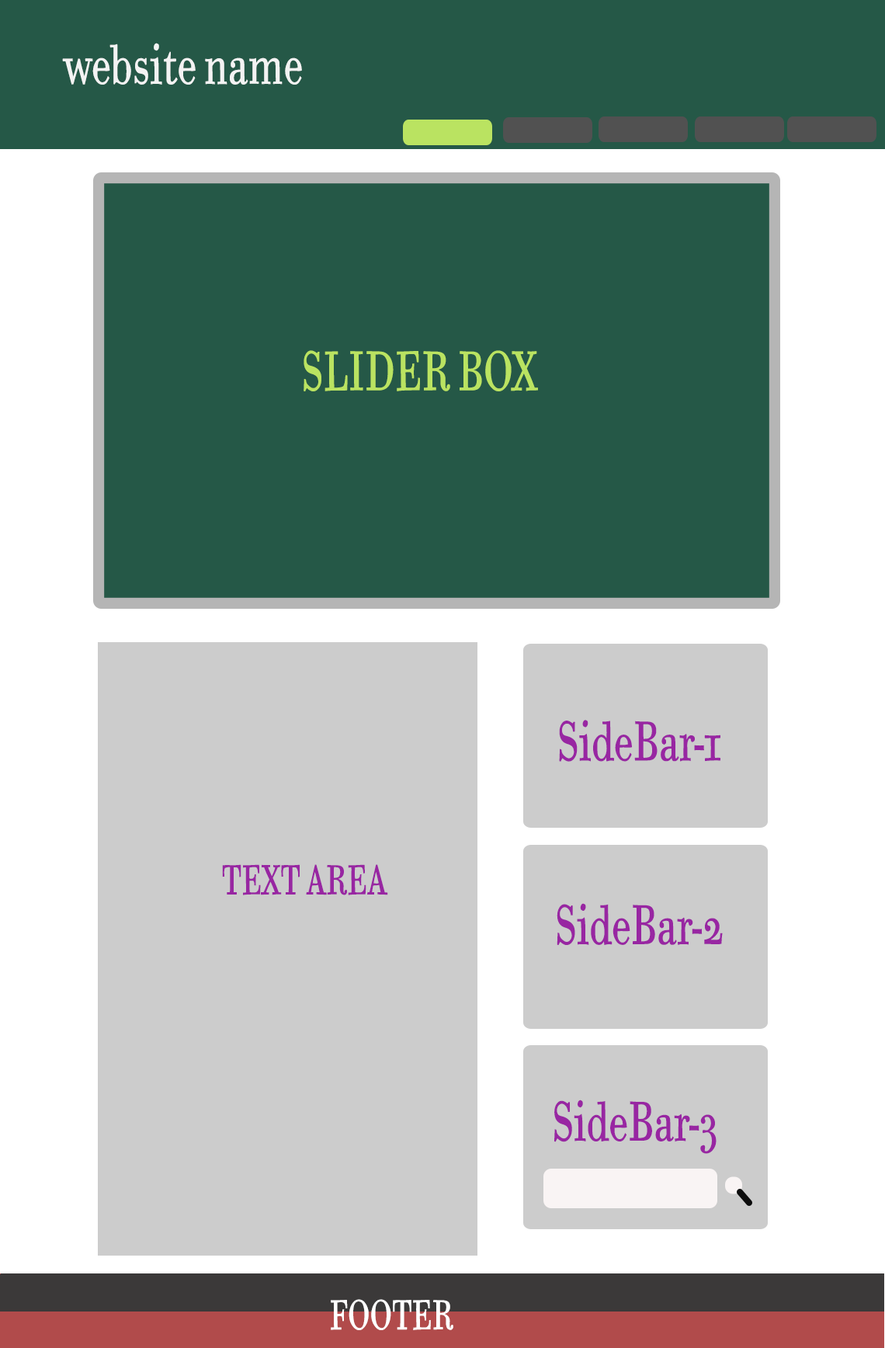
<style>
.page{position:relative;width:885px;height:1348px;background:#255847}
.page>*{position:absolute;margin:0}
.t1{font:55.9px "BodoniSixOSITCTTBook";color:#f3f3f3;scale:0.67 1}
.t2{font:55.9px "BodoniSixOSITCTTBook";color:#bae361;scale:0.67 1}
.t3{font:55.9px "BodoniSixOSITCTTBook";color:#9826a2;scale:0.67 1}
.t4{font:41.9px "BodoniSixOSITCTTBook";color:#9826a2;scale:0.67 1}
.t5{font:41.9px "BodoniSixOSITCTTBook";color:#ffffff;scale:0.67 1}
</style>
<div class="page">
<p class="t1" style="left:62px;top:43px;width:240px;height:42px">website name</p>
<p class="t2" style="left:304px;top:350px;width:234px;height:41px">SLIDER BOX</p>
<p class="t3" style="left:559px;top:720px;width:161px;height:41px">SideBar-1</p>
<p class="t4" style="left:222px;top:864px;width:166px;height:31px">TEXT AREA</p>
<p class="t3" style="left:557px;top:903px;width:166px;height:42px">SideBar-2</p>
<p class="t3" style="left:554px;top:1099px;width:162px;height:54px">SideBar-3</p>
<p class="t5" style="left:331px;top:1299px;width:122px;height:31px">FOOTER</p>
</div>
